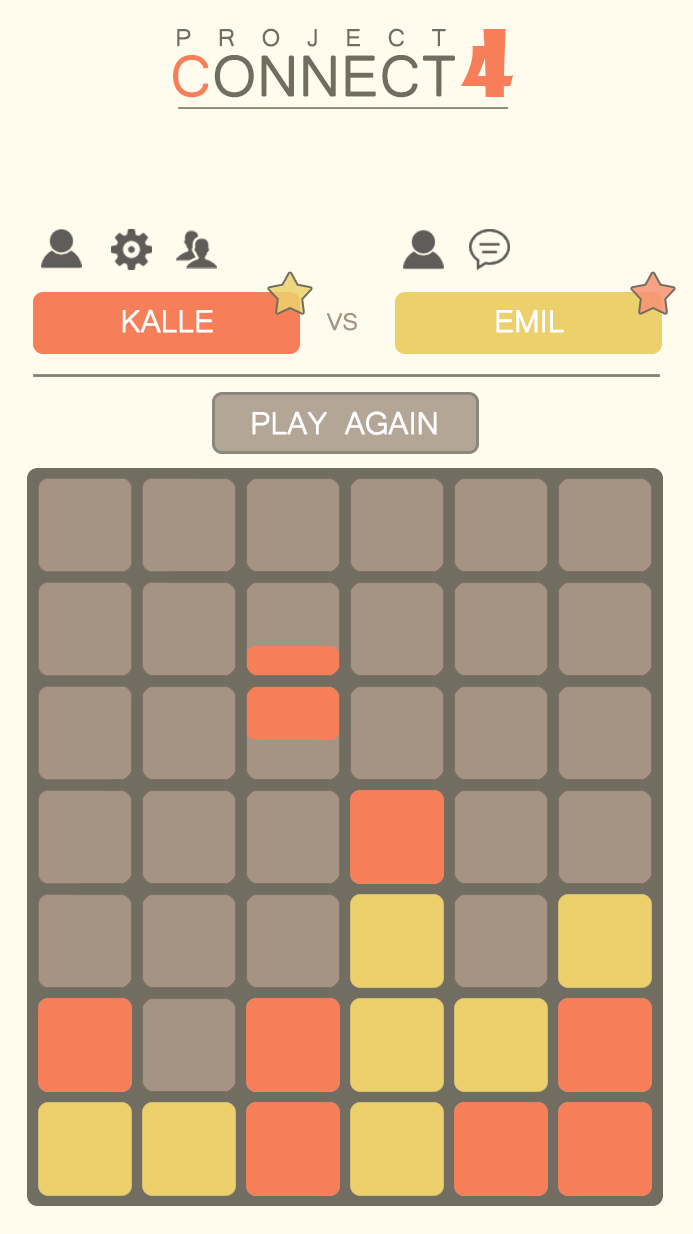
<style>
.page{position:relative;width:693px;height:1234px;background:#fffced}
.page>*{position:absolute;margin:0}
.t1{font:30.5px "Microsoft-Yi-Baiti";letter-spacing:0.855em;color:#716d61;text-transform:uppercase;font-weight:bold}
.t2{font:89.6px "ShowcardGothic-Reg";color:#f67e59;text-transform:uppercase}
.t3{font:72.5px "Microsoft-Yi-Baiti";color:#716d61;text-transform:uppercase;font-weight:bold}
.t4{font:72.5px "Microsoft-Yi-Baiti";color:#f67e59;text-transform:uppercase;font-weight:bold}
.t5{font:40px "Microsoft-Yi-Baiti";letter-spacing:-0.025em;color:#ffffff;text-transform:uppercase;font-weight:bold}
.t6{font:30px "Microsoft-Yi-Baiti";letter-spacing:-0.025em;color:#a59484;text-transform:uppercase;font-weight:bold}
</style>
<div class="page">
<p class="t1" style="left:177px;top:28px;width:269px;height:19px">project</p>
<p class="t2" style="left:461px;top:29px;width:53px;height:68px">4</p>
<p class="t3" style="left:173px;top:55px;width:282px;height:43px"><span class="t4">c</span>onnect</p>
<p class="t5" style="left:122px;top:309px;width:91px;height:24px">Kalle</p>
<p class="t6" style="left:326px;top:312px;width:31px;height:19px">vs</p>
<p class="t5" style="left:496px;top:310px;width:68px;height:23px">Emil</p>
<p class="t5" style="left:252px;top:411px;width:185px;height:24px">Play again</p>
</div>
